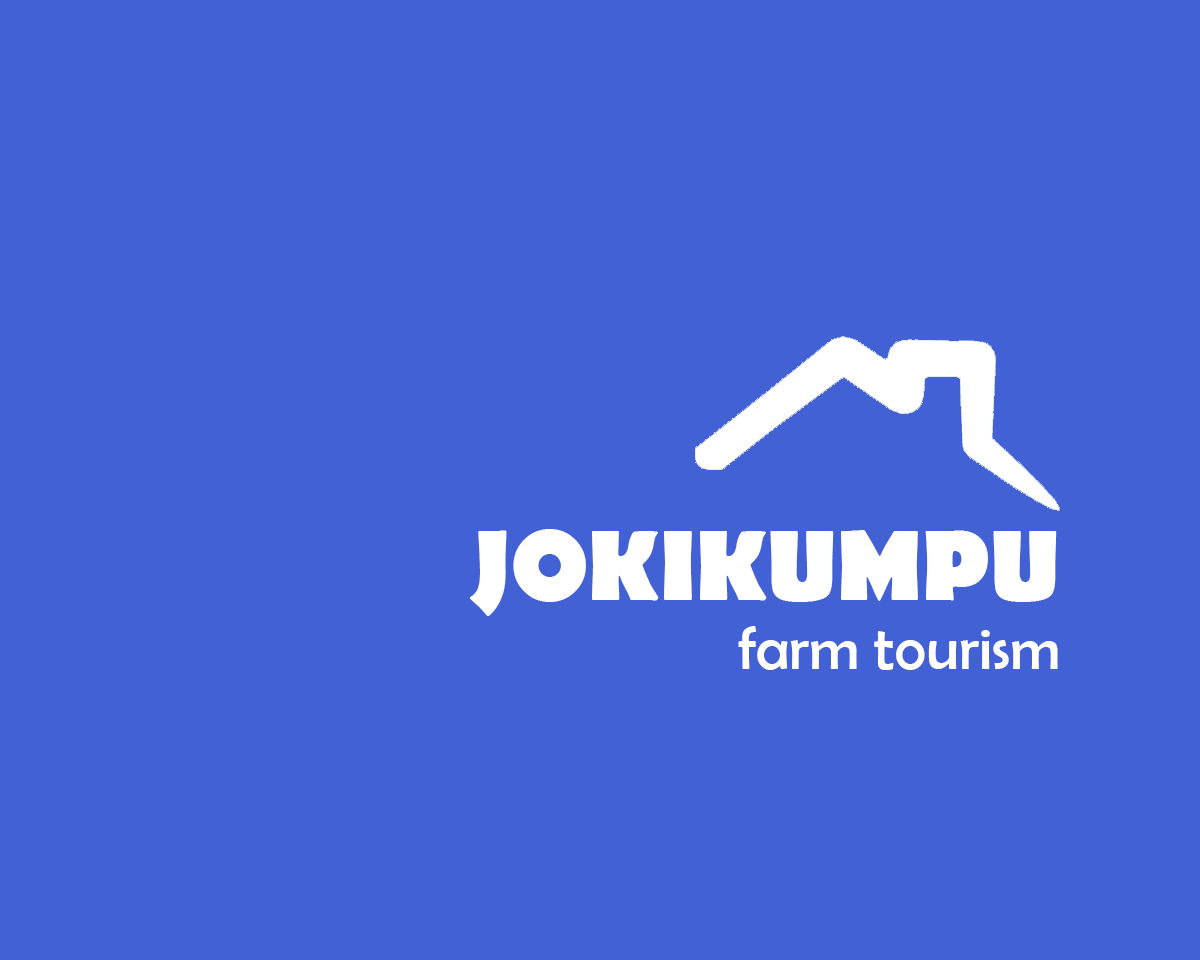
<style>
.page{position:relative;width:1200px;height:960px;background:#4261d5}
.page>*{position:absolute;margin:0}
.t1{font:100px "BerlinSansFB-Bold";color:#ffffff}
.t2{font:60px "BerlinSansFB-Reg";color:#ffffff}
</style>
<div class="page">
<p class="t1" style="left:469px;top:529px;width:588px;height:87px">JOKIKUMPU</p>
<p class="t2" style="left:738px;top:626px;width:320px;height:44px">farm tourism</p>
</div>
